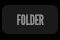
<style>
.page{position:relative;width:60px;height:40px;background:#1a1a1a}
.page>*{position:absolute;margin:0}
.t1{font:14px "LeagueGothic";color:#939393;text-transform:uppercase}
</style>
<div class="page">
<p class="t1" style="left:17px;top:14px;width:27px;height:11px">FOLDER</p>
</div>
